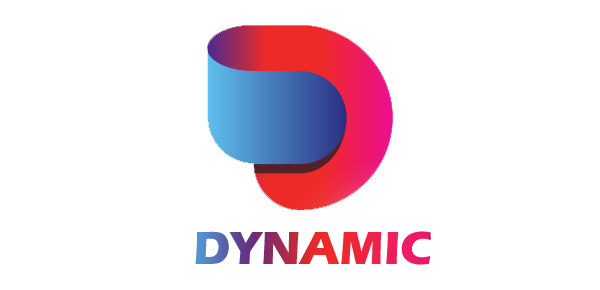
<style>
.page{position:relative;width:600px;height:290px;background:#ffffff}
.page>*{position:absolute;margin:0}
.t1{font:48px "ErasITC-Bold"}
</style>
<div class="page">
<p class="t1" style="left:195px;top:231px;width:236px;height:34px">DYNAMIC</p>
</div>
